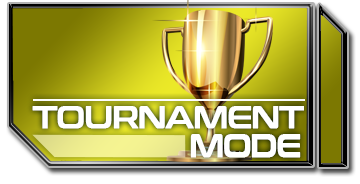
<style>
.page{position:relative;width:360px;height:184px}
.page>*{position:absolute;margin:0}
.t1{font:30px "ConthraxSb-Regular";letter-spacing:-0.055em;color:#ffffff;text-transform:uppercase;font-weight:bold}
.t2{font:32.5px "ConthraxSb-Regular";letter-spacing:-0.055em;color:#ffffff;text-transform:uppercase;font-weight:bold;scale:0.89 1}
</style>
<div class="page">
<p class="t1" style="left:32px;top:106px;width:272px;height:23px">tournament</p>
<p class="t2" style="left:190px;top:134px;width:111px;height:24px">MODE</p>
</div>
